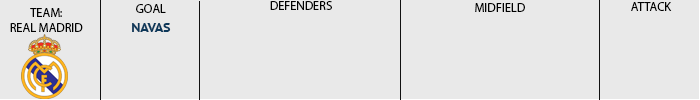
<style>
.page{position:relative;width:700px;height:100px;background:#e9e9e9}
.page>*{position:absolute;margin:0}
.t1{font:12.5px "MyriadPro-Regular";color:#000000}
.t2{font:12.5px "MyriadPro-Regular";color:#010101}
.t3{font:12.5px "PTSans-CaptionBold";color:#0d385a}
</style>
<div class="page">
<p class="t1" style="left:136px;top:4px;width:30px;height:9px">GOAL</p>
<p class="t1" style="left:270px;top:1px;width:62px;height:9px">DEFENDERS</p>
<p class="t1" style="left:475px;top:3px;width:50px;height:9px">MIDFIELD</p>
<p class="t1" style="left:631px;top:2px;width:41px;height:9px">ATTACK</p>
<p class="t2" style="left:10px;top:8px;width:73px;height:24px;text-align:center">TEAM:<br>REAL MADRID</p>
<p class="t3" style="left:132px;top:23px;width:39px;height:9px">NAVAS</p>
</div>
